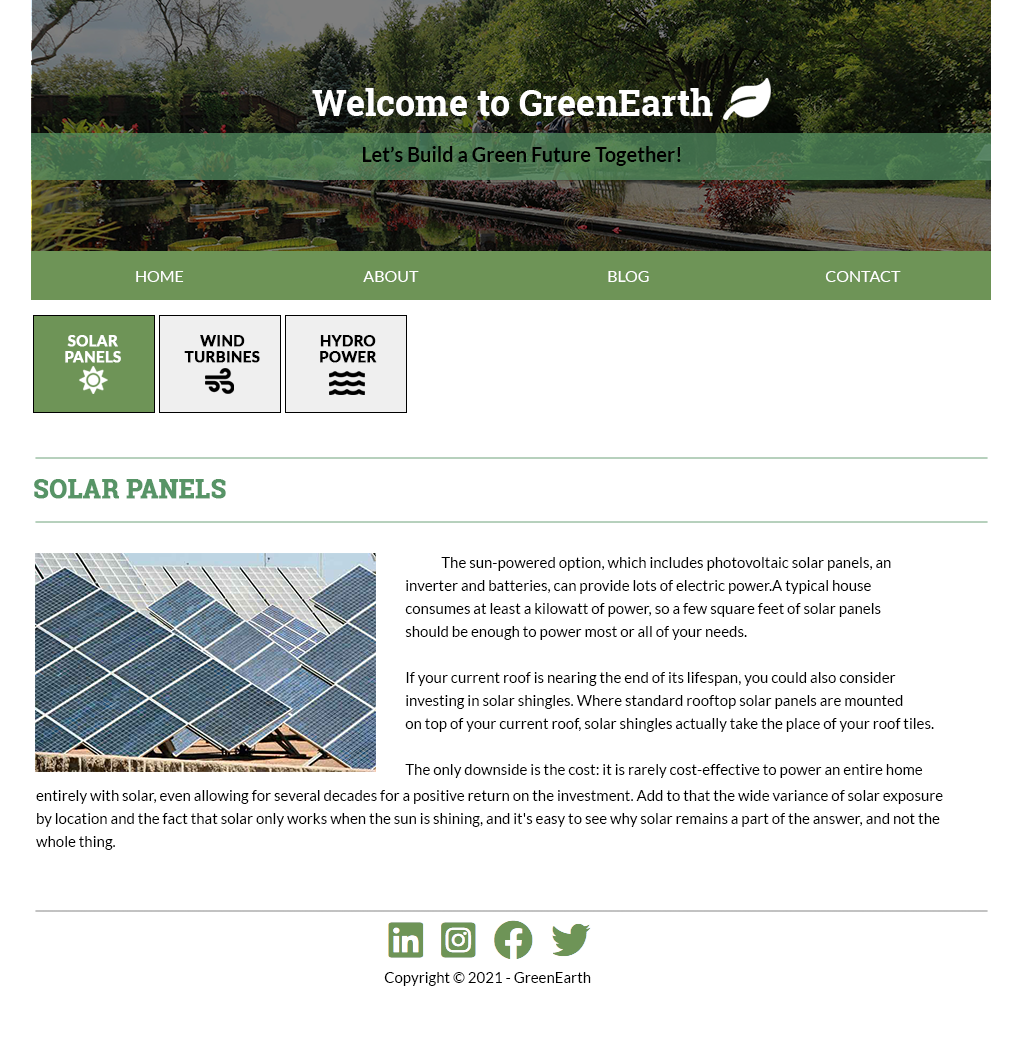
<style>
.page{position:relative;width:1024px;height:1041px;background:#ffffff}
.page>*{position:absolute;margin:0}
.t1{font:36px "RobotoSlab-Bold";color:#ffffff}
.t2{font:20px "Lato-Bold";color:#000000}
.t3{font:16px "Lato-Regular";color:#ffffff}
.t4{font:15px/16px "Lato-Bold";color:#ffffff;font-weight:bold}
.t5{font:15px/16px "Lato-Bold";color:#000000;font-weight:bold}
.t6{font:25px "RobotoSlab-Bold";color:#579466;font-weight:bold}
.t7{font:15px/23px "Lato-Regular";color:#000000}
.t8{font:15px "Lato-Regular";color:#000000}
</style>
<div class="page">
<p class="t1" style="left:312px;top:88px;width:401px;height:28px">Welcome to GreenEarth</p>
<p class="t2" style="left:363px;top:146px;width:318px;height:20px">Let’s Build a Green Future Together!</p>
<p class="t3" style="left:136px;top:271px;width:765px;height:11px">HOME          ABOUT                   BLOG         CONTACT</p>
<p class="t4" style="left:65px;top:335px;width:56px;height:28px;text-align:center">SOLAR<br>PANELS</p>
<p class="t5" style="left:184px;top:335px;width:76px;height:28px;text-align:center">WIND<br>TURBINES</p>
<p class="t5" style="left:320px;top:335px;width:57px;height:28px;text-align:center">HYDRO<br>POWER</p>
<p class="t6" style="left:34px;top:479px;width:192px;height:20px">SOLAR PANELS</p>
<p class="t7" style="left:405px;top:557px;width:529px;height:221px">The sun-powered option, which includes photovoltaic solar panels, an<br>inverter and batteries, can provide lots of electric power.A typical house<br>consumes at least a kilowatt of power, so a few square feet of solar panels<br>should be enough to power most or all of your needs.<br><br>If your current roof is nearing the end of its lifespan, you could also consider<br>investing in solar shingles. Where standard rooftop solar panels are mounted<br>on top of your current roof, solar shingles actually take the place of your roof tiles.<br><br>The only downside is the cost: it is rarely cost-effective to power an entire home</p>
<p class="t7" style="left:36px;top:790px;width:907px;height:60px">entirely with solar, even allowing for several decades for a positive return on the investment. Add to that the wide variance of solar exposure<br>by location and the fact that solar only works when the sun is shining, and it's easy to see why solar remains a part of the answer, and not the<br>whole thing.</p>
<p class="t8" style="left:384px;top:972px;width:207px;height:14px">Copyright © 2021 - GreenEarth</p>
</div>
